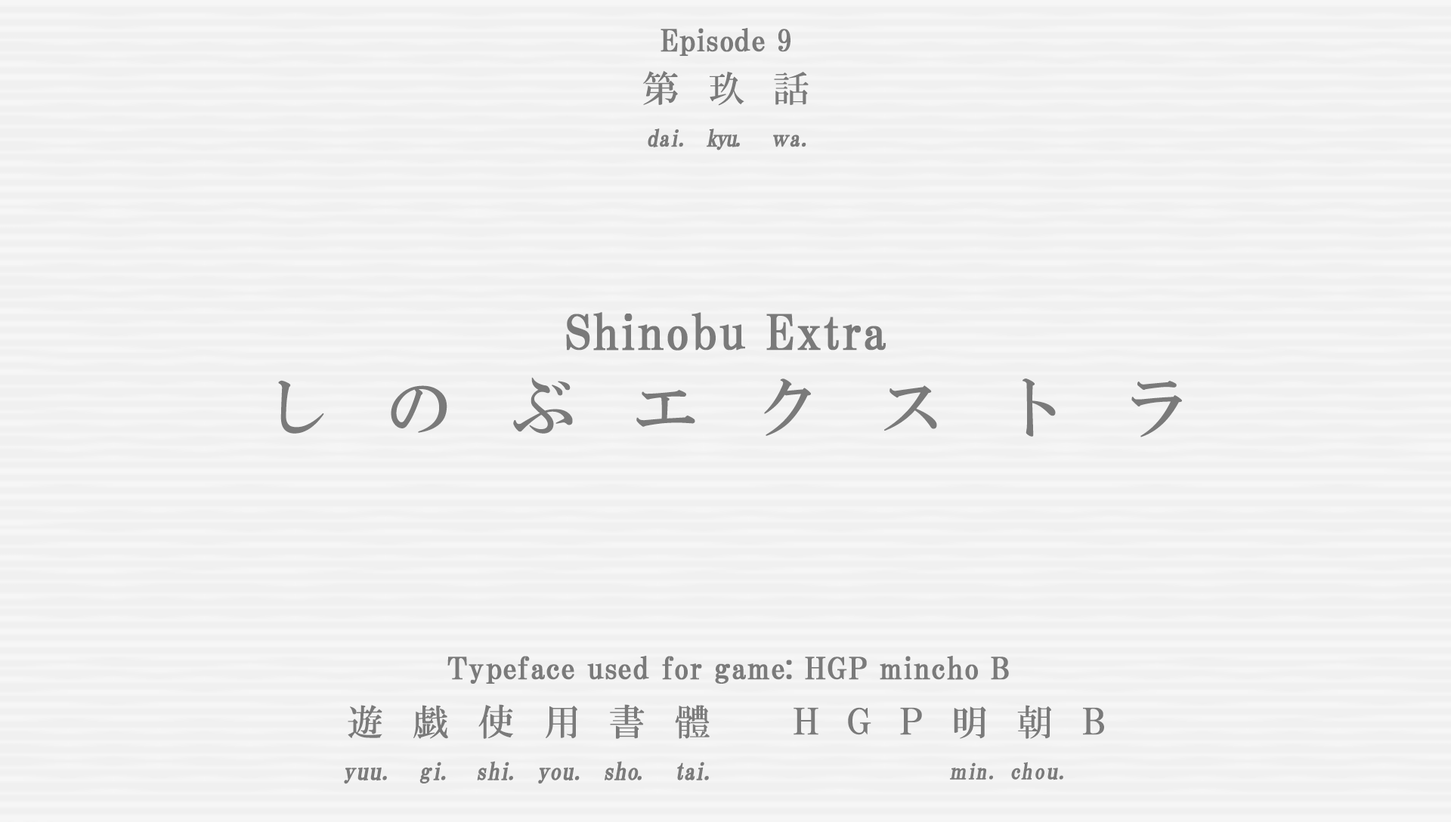
<style>
.page{position:relative;width:1451px;height:822px;background:#f0f0f0}
.page>*{position:absolute;margin:0}
.t1{font:30.2px "HGPMinchoB";letter-spacing:0.01em;color:#7a7a7a;font-weight:bold}
.t2{font:36.5px "HGMinchoB";letter-spacing:0.79em;color:#7a7a7a}
.t3{font:23.2px "HGMinchoB";letter-spacing:-0.1em;color:#7a7a7a;font-weight:bold;scale:0.96 1}
.t4{font:23.2px "HGMinchoB";color:#7a7a7a;font-weight:bold;scale:0.96 1}
.t5{font:23.2px "HGMinchoB";letter-spacing:-0.075em;color:#7a7a7a;font-weight:bold;scale:0.96 1}
.t6{font:23.2px "HGMinchoB";letter-spacing:0.07em;color:#7a7a7a;font-weight:bold;scale:0.96 1}
.t7{font:23.2px "HGMinchoB";letter-spacing:-0.05em;color:#7a7a7a;font-weight:bold;scale:0.86 1}
.t8{font:48.4px "HGPMinchoB";letter-spacing:0.01em;color:#7a7a7a;font-weight:bold}
.t9{font:65.7px "HGMinchoB";letter-spacing:0.87em;color:#7a7a7a}
.t10{font:36.3px "HGMinchoB";letter-spacing:0.81em;color:#7a7a7a}
.t11{font:36.3px "HGMinchoB";letter-spacing:0.8em;color:#7a7a7a}
.t12{font:36.3px "HGMinchoB";letter-spacing:0.79em;color:#7a7a7a}
.t13{font:36.3px "HGMinchoB";letter-spacing:0.71em;color:#7a7a7a;scale:0.85 1}
.t14{font:36.3px "HGMinchoB";letter-spacing:0.53em;color:#7a7a7a}
.t15{font:24.2px "HGMinchoB";color:#7a7a7a;font-weight:bold}
.t16{font:24.2px "HGMinchoB";letter-spacing:0.025em;color:#7a7a7a;font-weight:bold;scale:0.96 1}
.t17{font:24.2px "HGMinchoB";letter-spacing:0.075em;color:#7a7a7a;font-weight:bold;scale:0.96 1}
.t18{font:24.2px "HGMinchoB";letter-spacing:-0.025em;color:#7a7a7a;font-weight:bold;scale:0.96 1}
.t19{font:24.2px "HGMinchoB";letter-spacing:-0.11em;color:#7a7a7a;font-weight:bold;scale:0.96 1}
.t20{font:24.2px "HGMinchoB";color:#7a7a7a;font-weight:bold;scale:0.96 1}
.t21{font:24.2px "HGMinchoB";letter-spacing:-0.05em;color:#7a7a7a;font-weight:bold;scale:0.96 1}
.t22{font:24.2px "HGMinchoB";letter-spacing:-0.12em;color:#7a7a7a;font-weight:bold;scale:0.96 1}
.t23{font:24.2px "HGMinchoB";letter-spacing:-0.01em;color:#7a7a7a;font-weight:bold;scale:0.96 1}
.t24{font:24.2px "HGMinchoB";letter-spacing:0.005em;color:#7a7a7a;font-weight:bold;scale:0.96 1}
.t25{font:24.2px "HGMinchoB";letter-spacing:-0.09em;color:#7a7a7a;font-weight:bold;scale:0.96 1}
.t26{font:24.2px "HGMinchoB";letter-spacing:-0.075em;color:#7a7a7a;font-weight:bold;scale:0.96 1}
.t27{font:24.2px "HGMinchoB";letter-spacing:-0.1em;color:#7a7a7a;font-weight:bold;scale:0.96 1}
.t28{font:22px "HGMinchoB";letter-spacing:0.07em;color:#7a7a7a;font-weight:bold;scale:0.96 1}
.t29{font:22px "HGMinchoB";letter-spacing:-0.075em;color:#7a7a7a;font-weight:bold;scale:0.83 1}
.t30{font:22px "HGMinchoB";letter-spacing:-0.075em;color:#7a7a7a;font-weight:bold;scale:0.96 1}
.t31{font:22px "HGMinchoB";color:#7a7a7a;font-weight:bold;scale:0.96 1}
.t32{font:22px "HGMinchoB";letter-spacing:0.05em;color:#7a7a7a;font-weight:bold;scale:0.96 1}
.t33{font:22px "HGMinchoB";letter-spacing:0.01em;color:#7a7a7a;font-weight:bold;scale:1.06 1}
</style>
<div class="page">
<p class="t1" style="left:660px;top:28px;width:130px;height:28px">Episode 9</p>
<p class="t2" style="left:643px;top:71px;width:165px;height:35px">第玖話</p>
<p class="t3" style="left:647px;top:128px;width:159px;height:22px"><span class="t4">d</span><span class="t5">a</span>i<span class="t6">. </span>kyu<span class="t6">.  </span><span class="t7">ｗ</span><span class="t4">a</span><span class="t6">.</span></p>
<p class="t8" style="left:566px;top:312px;width:319px;height:39px">Shinobu Extra</p>
<p class="t9" style="left:278px;top:377px;width:904px;height:60px">しのぶエクストラ</p>
<p class="t1" style="left:447px;top:656px;width:562px;height:28px">Typeface used for game: HGP mincho B</p>
<p class="t10" style="left:348px;top:704px;width:361px;height:35px">遊<span class="t11">戯</span>使<span class="t12">用</span>書體</p>
<p class="t13" style="left:793px;top:707px;width:311px;height:28px">ＨＧＰ    Ｂ</p>
<p class="t12" style="left:953px;top:705px;width:98px;height:34px">明<span class="t14">朝</span></p>
<p class="t15" style="left:344px;top:761px;width:365px;height:23px"><span class="t16">y</span>uu<span class="t17">. </span><span class="t18">g</span><span class="t19">i</span><span class="t17">. </span><span class="t20">s</span><span class="t21">h</span><span class="t22">i</span><span class="t17">. </span><span class="t23">y</span><span class="t24">ou</span><span class="t17">. </span><span class="t18">s</span><span class="t20">h</span><span class="t25">o</span><span class="t17">.  </span><span class="t26">t</span><span class="t27">ai</span><span class="t17">.</span></p>
<p class="t28" style="left:950px;top:762px;width:113px;height:18px"><span class="t29">ｍ</span><span class="t30">i</span>n. <span class="t31">c</span>h<span class="t32">o</span><span class="t33">u</span>.</p>
</div>
